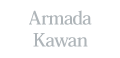
<style>
.page{position:relative;width:120px;height:58px;background:#ffffff}
.page>*{position:absolute;margin:0}
.t1{font:19px/22px "HeiseiMinStd-W7";letter-spacing:-0.04em;color:#afb5b9}
</style>
<div class="page">
<p class="t1" style="left:29px;top:10px;width:63px;height:37px;text-align:center">Armada<br>Kawan</p>
</div>
